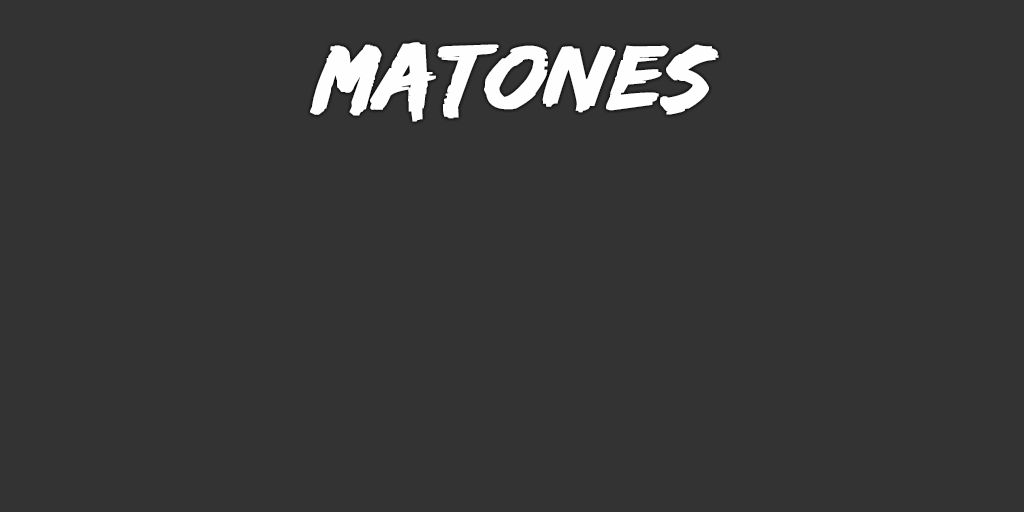
<style>
.page{position:relative;width:1024px;height:512px;background:#333333}
.page>*{position:absolute;margin:0}
.t1{font:94px "EdoSZ";color:#fefefe;font-weight:bold;font-style:italic;scale:1.04 1}
</style>
<div class="page">
<p class="t1" style="left:310px;top:42px;width:409px;height:80px">Matones</p>
</div>
